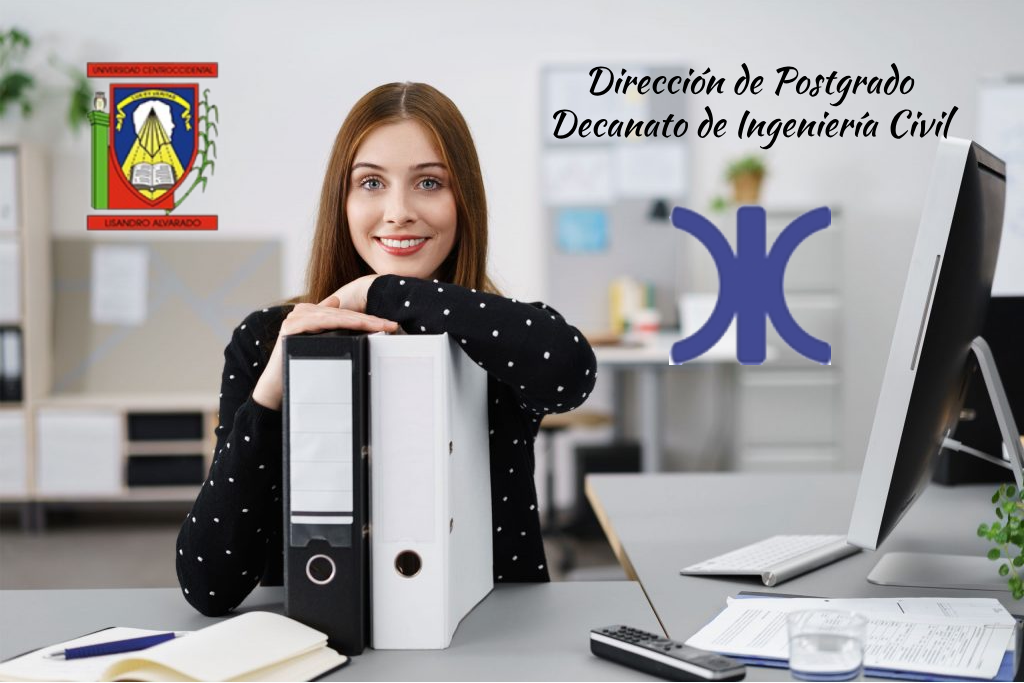
<style>
.page{position:relative;width:1024px;height:683px}
.page>*{position:absolute;margin:0}
.t1{font:36px "KaushanScript-Regular";color:#000000}
</style>
<div class="page">
<p class="t1" style="left:552px;top:63px;width:407px;height:87px;text-align:center">Dirección de Postgrado<br>Decanato de Ingeniería Civil</p>
</div>
